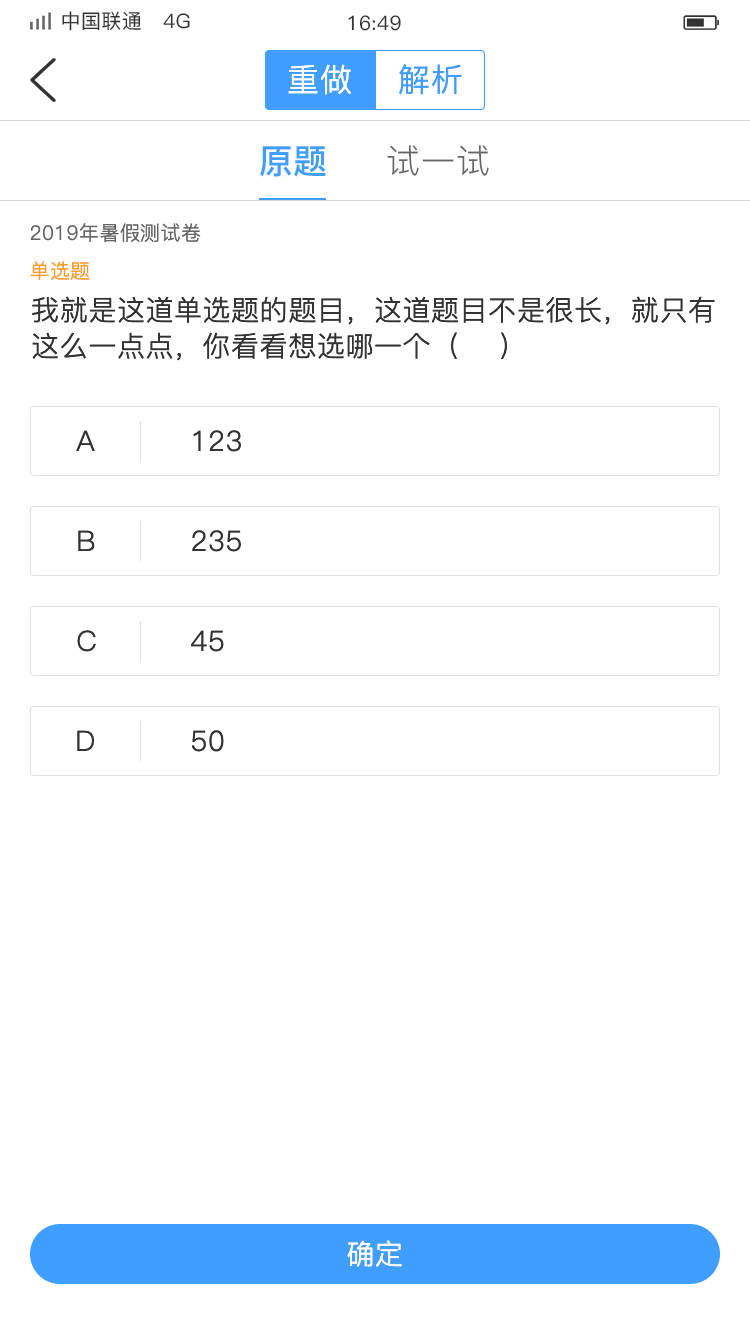
<style>
.page{position:relative;width:750px;height:1334px;background:#ffffff}
.page>*{position:absolute;margin:0}
.t1{font:20px "PingFang-SC-Medium";letter-spacing:0.02em;color:#333333}
.t2{font:32px "PingFang-SC-Regular";letter-spacing:0.02em;color:#ffffff}
.t3{font:32px "PingFang-SC-Regular";letter-spacing:0.02em;color:#409eff}
.t4{font:34px "PingFang-SC-Bold";color:#409eff}
.t5{font:34px "PingFang-SC-Regular";letter-spacing:0.02em;color:#666666}
.t6{font:20px "PingFang-SC-Regular";letter-spacing:0.02em;color:#666666}
.t7{font:20px "PingFang-SC-Regular";letter-spacing:0.02em;color:#ff9e21}
.t8{font:28px/36px "PingFang-SC-Regular";letter-spacing:0.02em;color:#333333}
.t9{font:28px "PingFang-SC-Regular";letter-spacing:0.02em;color:#333333}
.t10{font:28px "PingFang-SC-Regular";letter-spacing:0.02em;color:#ffffff}
</style>
<div class="page">
<p class="t1" style="left:62px;top:11px;width:128px;height:20px">中国联通   4G</p>
<p class="t1" style="left:348px;top:15px;width:53px;height:16px">16:49</p>
<p class="t2" style="left:288px;top:64px;width:63px;height:31px">重做</p>
<p class="t3" style="left:399px;top:64px;width:63px;height:31px">解析</p>
<p class="t4" style="left:260px;top:146px;width:66px;height:31px">原题</p>
<p class="t5" style="left:387px;top:145px;width:102px;height:31px">试一试</p>
<p class="t6" style="left:30px;top:223px;width:171px;height:20px">2019年暑假测试卷</p>
<p class="t7" style="left:30px;top:261px;width:60px;height:19px">单选题</p>
<p class="t8" style="left:32px;top:296px;width:683px;height:65px">我就是这道单选题的题目，这道题目不是很长，就只有这么一点点，你看看想选哪一个（    ）</p>
<p class="t9" style="left:76px;top:430px;width:19px;height:21px">A</p>
<p class="t9" style="left:193px;top:430px;width:48px;height:22px">123</p>
<p class="t9" style="left:78px;top:530px;width:17px;height:21px">B</p>
<p class="t9" style="left:192px;top:530px;width:49px;height:22px">235</p>
<p class="t9" style="left:77px;top:630px;width:19px;height:22px">C</p>
<p class="t9" style="left:191px;top:630px;width:33px;height:22px">45</p>
<p class="t9" style="left:77px;top:730px;width:17px;height:21px">D</p>
<p class="t9" style="left:192px;top:730px;width:32px;height:22px">50</p>
<p class="t10" style="left:347px;top:1240px;width:55px;height:27px">确定</p>
</div>
